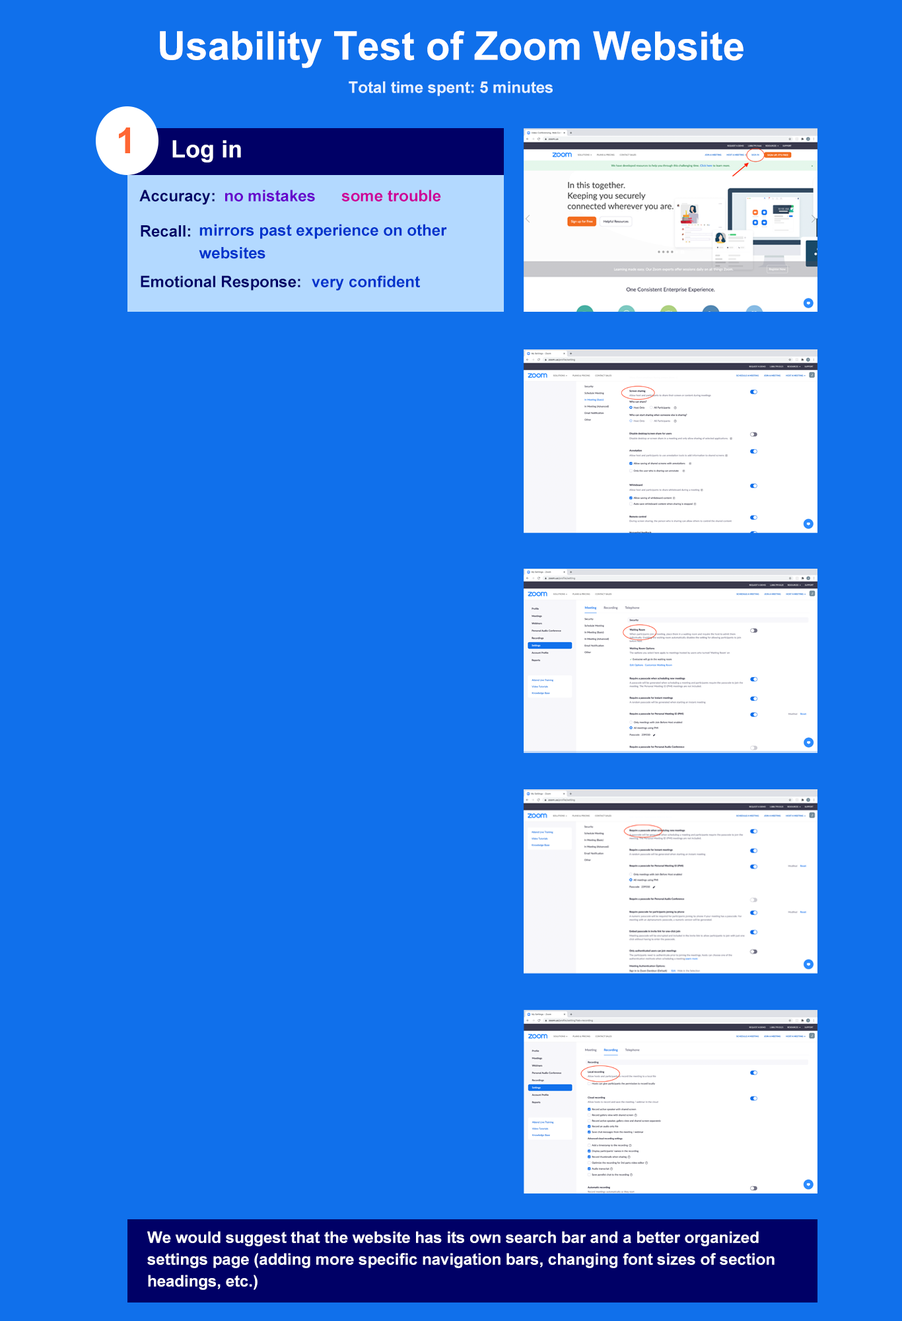
<style>
.page{position:relative;width:902px;height:1321px;background:#1070eb}
.page>*{position:absolute;margin:0}
.t1{font:39.6px "Arial-BoldMT";color:#ffffff}
.t2{font:15.9px "Arial-BoldMT";color:#e6f2ff}
.t3{font:23.8px "Arial-BoldMT";color:#ffffff}
.t4{font:15.9px "Arial-BoldMT";color:#000066}
.t5{font:15.9px "Arial-BoldMT";color:#6600cc}
.t6{font:15.9px "Arial-BoldMT";color:#cc0099}
.t7{font:15.9px "Arial-BoldMT";color:#0033cc}
.t8{font:15.9px "Arial-BoldMT";color:#ffffff}
</style>
<div class="page">
<p class="t1" style="left:160px;top:30px;width:584px;height:38px">Usability Test of Zoom Website</p>
<p class="t2" style="left:349px;top:81px;width:204px;height:15px">Total time spent: 5 minutes</p>
<p class="t3" style="left:172px;top:140px;width:69px;height:23px">Log in</p>
<p class="t4" style="left:139px;top:190px;width:76px;height:15px">Accuracy:</p>
<p class="t5" style="left:225px;top:190px;width:90px;height:12px">no mistakes</p>
<p class="t6" style="left:342px;top:190px;width:99px;height:12px">some trouble</p>
<p class="t4" style="left:141px;top:225px;width:49px;height:12px">Recall:</p>
<p class="t7" style="left:199px;top:224px;width:248px;height:35px">mirrors past experience on other <br>websites</p>
<p class="t4" style="left:141px;top:275px;width:160px;height:16px">Emotional Response:</p>
<p class="t7" style="left:312px;top:275px;width:108px;height:16px">very confident</p>
<p class="t8" style="left:147px;top:1231px;width:628px;height:59px">We would suggest that the website has its own search bar and a better organized <br>settings page (adding more specific navigation bars, changing font sizes of section <br>headings, etc.)</p>
</div>
